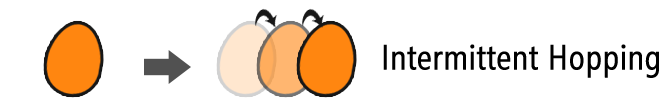
<style>
.page{position:relative;width:660px;height:112px;background:#ffffff}
.page>*{position:absolute;margin:0}
.t1{font:35px "SegoeCondensed";color:#000000;font-weight:bold}
</style>
<div class="page">
<p class="t1" style="left:383px;top:44px;width:276px;height:34px">Intermittent Hopping</p>
</div>
